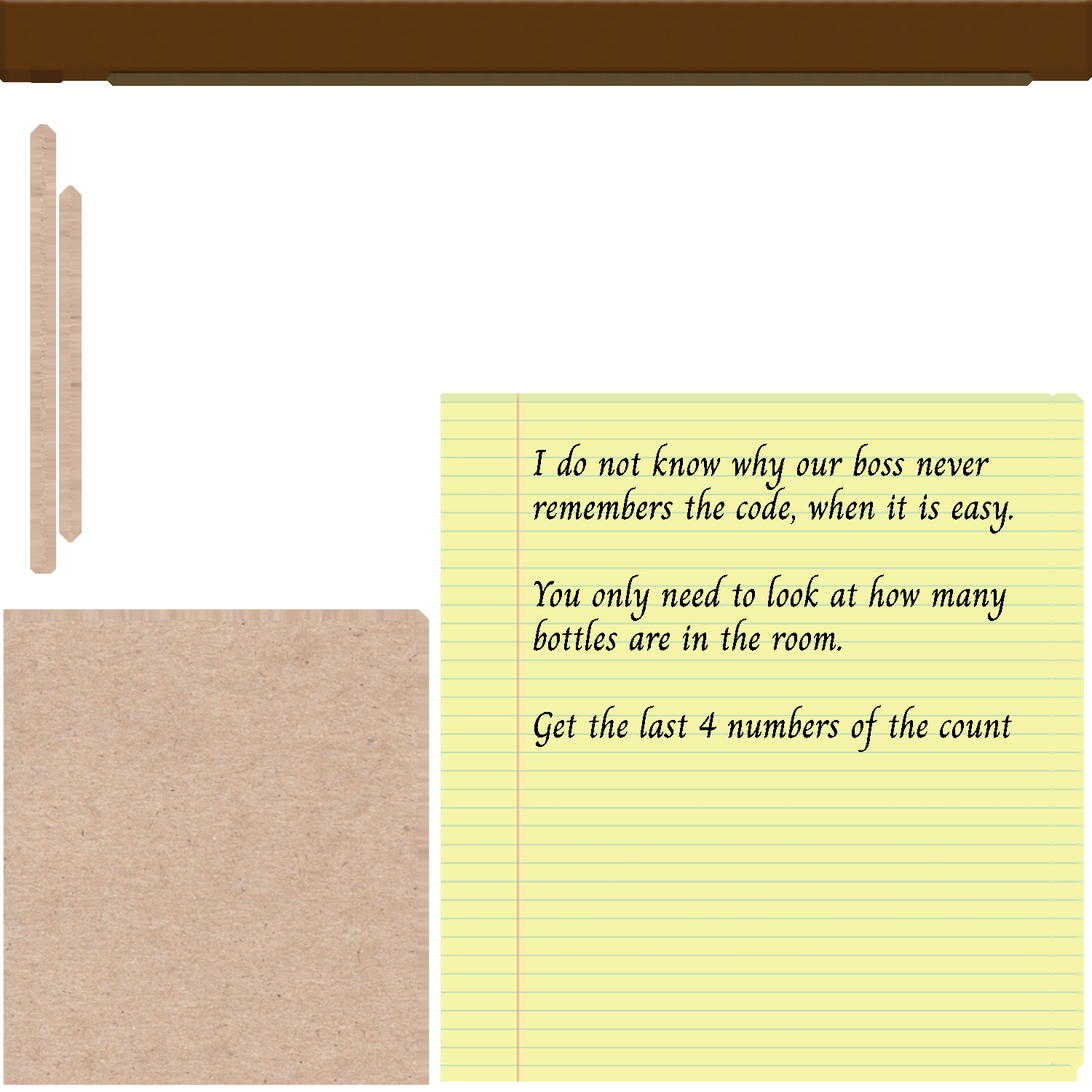
<style>
.page{position:relative;width:1092px;height:1092px;background:#ffffff}
.page>*{position:absolute;margin:0}
.t1{font:36.4px "Charm-Regular";color:#000000}
</style>
<div class="page">
<p class="t1" style="left:533px;top:443px;width:480px;height:309px">I do not know why our boss never <br>remembers the code, when it is easy.<br><br>You only need to look at how many<br>bottles are in the room.<br><br>Get the last 4 numbers of the count</p>
</div>
